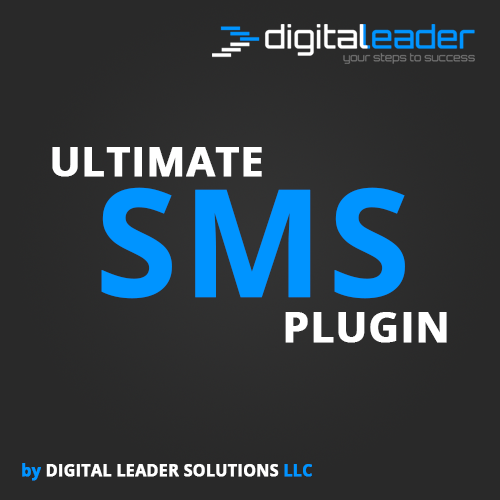
<style>
.page{position:relative;width:500px;height:500px;background:#292929}
.page>*{position:absolute;margin:0}
.t1{font:41.3px "OpenSans-Bold";color:#ffffff;text-transform:uppercase;font-weight:bold}
.t2{font:150.4px "OpenSans-Bold";color:#0094ff;font-weight:bold}
.t3{font:42.5px "OpenSans-Bold";color:#ffffff;text-transform:uppercase;font-weight:bold}
.t4{font:15.9px "OpenSans-Bold";color:#ffffff;font-weight:bold}
.t5{font:15.9px "OpenSans-Bold";color:#0094ff;font-weight:bold}
</style>
<div class="page">
<p class="t1" style="left:52px;top:147px;width:210px;height:30px">Ultimate</p>
<p class="t2" style="left:101px;top:187px;width:304px;height:112px">SMS</p>
<p class="t3" style="left:285px;top:312px;width:162px;height:31px">plugin</p>
<p class="t4" style="left:22px;top:463px;width:290px;height:18px"><span class="t5">by </span>DIGITAL LEADER SOLUTIONS<span class="t5"> LLC</span></p>
</div>
